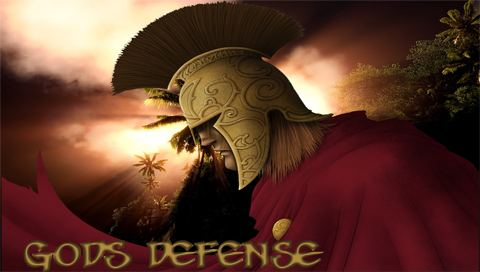
<style>
.page{position:relative;width:480px;height:272px}
.page>*{position:absolute;margin:0}
.t1{font:40.5px "SevenSwordsmenBB";font-weight:bold}
</style>
<div class="page">
<p class="t1" style="left:23px;top:240px;width:301px;height:33px">Gods Defense</p>
</div>
